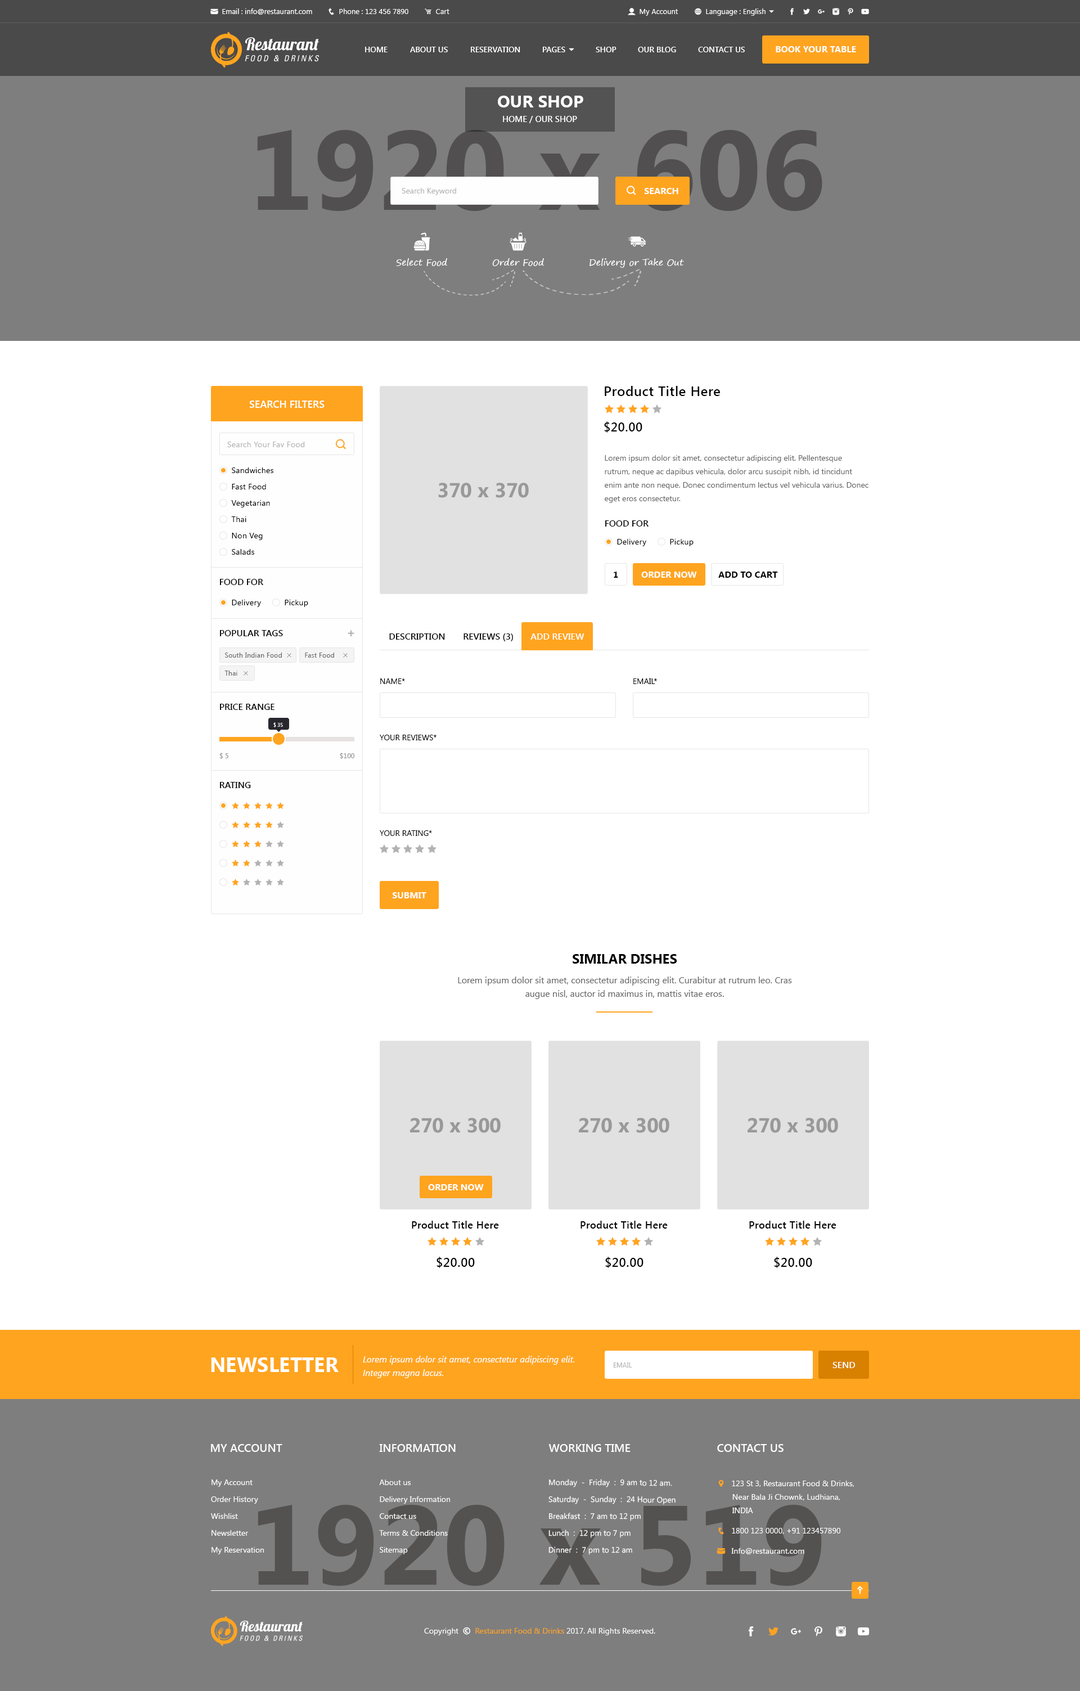
<style>
.page{position:relative;width:1080px;height:1691px;background:#ffffff}
.page>*{position:absolute;margin:0}
.t1{font:7.9px "SegoeUI-SemiBold";color:#ffffff}
.t2{font:9px "SegoeUI-Bold";color:#ffffff}
.t3{font:16.9px "SegoeUI-Bold";color:#ffffff}
.t4{font:8.4px "SegoeUI-SemiBold";color:#ffffff}
.t5{font:7.9px "SegoeUI";color:#b2b2b2}
.t6{font:9px "SegoePrint";color:#ffffff}
.t7{font:13.5px "SegoeUI-SemiBold";letter-spacing:0.025em;color:#000000}
.t8{font:10.1px "SegoeUI-SemiBold";color:#ffffff}
.t9{font:12.4px "SegoeUI-SemiBold";letter-spacing:0.025em;color:#000000}
.t10{font:7.9px "SegoeUI";letter-spacing:0.025em;color:#b2b2b2}
.t11{font:7.9px/13.5px "SegoeUI";color:#686868}
.t12{font:7.9px "SegoeUI";letter-spacing:0.025em;color:#000000}
.t13{font:20.2px "SegoeUI-Bold";color:#999999}
.t14{font:9px "SegoeUI-SemiBold";color:#000000}
.t15{font:9px "SegoeUI-Bold";color:#000000}
.t16{font:9px "SegoeUI-Bold";color:#fefefe}
.t17{font:9px "SegoeUI-SemiBold";color:#ffffff}
.t18{font:6.8px "SegoeUI";letter-spacing:0.025em;color:#686868}
.t19{font:7.9px "SegoeUI";color:#000000}
.t20{font:9px "SegoeUI-SemiBold";color:#000000;text-transform:uppercase}
.t21{font:5.1px "SegoeUI";color:#ffffff}
.t22{font:6.8px "SegoeUI-SemiBold";color:#999999}
.t23{font:13.5px "SegoeUI-Bold";color:#000000}
.t24{font:9px/13.5px "SegoeUI";color:#686868}
.t25{font:10.1px "SegoeUI-SemiBold";letter-spacing:0.025em;color:#000000}
.t26{font:20.2px "SegoeUI-Bold";color:#ffffff}
.t27{font:9px/13.5px "SegoeUI-Italic";color:#ffffff}
.t28{font:6.8px "SegoeUI";color:#b2b2b2;text-transform:uppercase}
.t29{font:11.2px "SegoeUI-SemiBold";color:#ffffff}
.t30{font:7.9px/16.9px "SegoeUI";color:#ffffff}
.t31{font:112.5px "SegoeUI-Bold";color:#545151}
</style>
<div class="page">
<p class="t1" style="left:365px;top:47px;width:23px;height:5px">HOME</p>
<p class="t1" style="left:410px;top:47px;width:38px;height:5px">ABOUT US</p>
<p class="t1" style="left:471px;top:47px;width:49px;height:5px">RESERVATION</p>
<p class="t1" style="left:596px;top:47px;width:20px;height:5px">SHOP</p>
<p class="t1" style="left:638px;top:47px;width:38px;height:5px">OUR BLOG</p>
<p class="t1" style="left:698px;top:47px;width:47px;height:5px">CONTACT US</p>
<p class="t2" style="left:776px;top:46px;width:80px;height:6px">BOOK YOUR TABLE</p>
<p class="t3" style="left:498px;top:96px;width:85px;height:11px">OUR SHOP</p>
<p class="t4" style="left:503px;top:116px;width:74px;height:7px">HOME / OUR SHOP</p>
<p class="t5" style="left:402px;top:188px;width:54px;height:7px">Search Keyword</p>
<p class="t2" style="left:645px;top:188px;width:33px;height:6px">SEARCH</p>
<p class="t6" style="left:396px;top:258px;width:52px;height:8px">Select Food</p>
<p class="t6" style="left:492px;top:258px;width:52px;height:8px">Order Food</p>
<p class="t6" style="left:590px;top:258px;width:94px;height:10px">Delivery or Take Out</p>
<p class="t7" style="left:605px;top:386px;width:115px;height:10px">Product Title Here</p>
<p class="t8" style="left:249px;top:400px;width:76px;height:8px">SEARCH FILTERS</p>
<p class="t9" style="left:604px;top:421px;width:38px;height:12px">$20.00</p>
<p class="t10" style="left:227px;top:442px;width:78px;height:5px">Search Your Fav Food</p>
<p class="t11" style="left:605px;top:455px;width:263px;height:48px">Lorem ipsum dolor sit amet, consectetur adipiscing elit. Pellentesque rutrum, neque ac dapibus vehicula, dolor arcu suscipit nibh, id tincidunt enim ante non neque. Donec condimentum lectus vel vehicula varius. Donec eget eros consectetur.</p>
<p class="t12" style="left:232px;top:467px;width:41px;height:6px">Sandwiches</p>
<p class="t12" style="left:232px;top:484px;width:34px;height:5px">Fast Food</p>
<p class="t13" style="left:438px;top:483px;width:91px;height:15px">370 x 370</p>
<p class="t12" style="left:231px;top:500px;width:39px;height:7px">Vegetarian</p>
<p class="t12" style="left:231px;top:516px;width:15px;height:6px">Thai</p>
<p class="t14" style="left:605px;top:520px;width:44px;height:6px">FOOD FOR</p>
<p class="t12" style="left:232px;top:533px;width:31px;height:7px">Non Veg</p>
<p class="t12" style="left:617px;top:539px;width:29px;height:7px">Delivery</p>
<p class="t12" style="left:670px;top:539px;width:24px;height:7px">Pickup</p>
<p class="t12" style="left:232px;top:549px;width:22px;height:6px">Salads</p>
<p class="t14" style="left:220px;top:579px;width:43px;height:6px">FOOD FOR</p>
<p class="t15" style="left:614px;top:572px;width:4px;height:6px">1</p>
<p class="t16" style="left:641px;top:572px;width:56px;height:6px">ORDER NOW</p>
<p class="t15" style="left:718px;top:572px;width:60px;height:6px">ADD TO CART</p>
<p class="t12" style="left:232px;top:600px;width:29px;height:7px">Delivery</p>
<p class="t12" style="left:285px;top:600px;width:23px;height:7px">Pickup</p>
<p class="t14" style="left:220px;top:630px;width:63px;height:6px">POPULAR TAGS</p>
<p class="t14" style="left:389px;top:633px;width:56px;height:7px">DESCRIPTION</p>
<p class="t14" style="left:464px;top:633px;width:49px;height:8px">REVIEWS (3)</p>
<p class="t17" style="left:530px;top:633px;width:54px;height:7px">ADD REVIEW</p>
<p class="t18" style="left:225px;top:652px;width:57px;height:6px">South Indian Food</p>
<p class="t18" style="left:305px;top:652px;width:29px;height:6px">Fast Food</p>
<p class="t18" style="left:224px;top:670px;width:13px;height:6px">Thai</p>
<p class="t19" style="left:380px;top:678px;width:25px;height:6px">NAME*</p>
<p class="t19" style="left:633px;top:678px;width:24px;height:6px">EMAIL*</p>
<p class="t20" style="left:220px;top:704px;width:54px;height:6px">Price Range</p>
<p class="t21" style="left:273px;top:722px;width:10px;height:5px">$ 35</p>
<p class="t19" style="left:380px;top:735px;width:56px;height:5px">YOUR REVIEWS*</p>
<p class="t22" style="left:219px;top:753px;width:136px;height:6px">$ 5                                             $100</p>
<p class="t20" style="left:220px;top:782px;width:31px;height:6px">Rating</p>
<p class="t19" style="left:380px;top:830px;width:52px;height:6px">YOUR RATING*</p>
<p class="t2" style="left:393px;top:892px;width:33px;height:6px">SUBMIT</p>
<p class="t23" style="left:573px;top:954px;width:104px;height:10px">SIMILAR DISHES</p>
<p class="t24" style="left:458px;top:976px;width:334px;height:23px;text-align:center">Lorem ipsum dolor sit amet, consectetur adipiscing elit. Curabitur at rutrum leo. Cras augue nisl, auctor id maximus in, mattis vitae eros.</p>
<p class="t13" style="left:410px;top:1118px;width:91px;height:15px">270 x 300</p>
<p class="t13" style="left:579px;top:1118px;width:90px;height:15px">270 x 300</p>
<p class="t13" style="left:748px;top:1118px;width:90px;height:15px">270 x 300</p>
<p class="t16" style="left:428px;top:1184px;width:56px;height:6px">ORDER NOW</p>
<p class="t25" style="left:412px;top:1221px;width:87px;height:7px">Product Title Here</p>
<p class="t25" style="left:580px;top:1221px;width:88px;height:7px">Product Title Here</p>
<p class="t25" style="left:749px;top:1221px;width:87px;height:7px">Product Title Here</p>
<p class="t9" style="left:436px;top:1257px;width:39px;height:11px">$20.00</p>
<p class="t9" style="left:605px;top:1257px;width:39px;height:11px">$20.00</p>
<p class="t9" style="left:774px;top:1257px;width:38px;height:11px">$20.00</p>
<p class="t26" style="left:211px;top:1357px;width:128px;height:15px">NEWSLETTER</p>
<p class="t27" style="left:363px;top:1356px;width:211px;height:22px">Lorem ipsum dolor sit amet, consectetur adipiscing elit. Integer magna lacus.</p>
<p class="t17" style="left:832px;top:1362px;width:24px;height:6px">SEND</p>
<p class="t28" style="left:614px;top:1362px;width:18px;height:5px">Email</p>
<p class="t29" style="left:211px;top:1444px;width:71px;height:8px">MY ACCOUNT</p>
<p class="t29" style="left:379px;top:1444px;width:77px;height:8px">INFORMATION</p>
<p class="t29" style="left:548px;top:1444px;width:83px;height:8px">WORKING TIME</p>
<p class="t29" style="left:717px;top:1444px;width:67px;height:8px">CONTACT US</p>
<p class="t30" style="left:211px;top:1479px;width:53px;height:75px">My Account<br>Order History<br>Wishlist<br>Newsletter<br>My Reservation</p>
<p class="t30" style="left:379px;top:1479px;width:71px;height:75px">About us<br>Delivery Information<br>Contact us<br>Terms &amp; Conditions<br>Sitemap</p>
<p class="t30" style="left:548px;top:1479px;width:128px;height:76px">Monday  -  Friday  :  9 am to 12 am.<br>Saturday  -  Sunday  :  24 Hour Open<br>Breakfast  :  7 am to 12 pm<br>Lunch  :  12 pm to 7 pm<br>Dinner  :  7 pm to 12 am</p>
<p class="t31" style="left:258px;top:1505px;width:564px;height:81px">1920 x 519</p>
</div>
